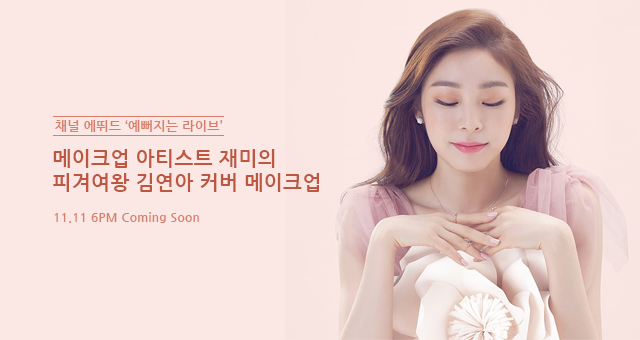
<style>
.page{position:relative;width:640px;height:340px;background:#fbe8e4}
.page>*{position:absolute;margin:0}
.t1{font:13px "NanumGothicBold";letter-spacing:0.025em;color:#d77f6c}
.t2{font:20px "NanumGothicBold";letter-spacing:0.025em;color:#bc5842}
.t3{font:12px "NanumGothicBold";letter-spacing:0.025em;color:#d77f6c}
</style>
<div class="page">
<p class="t1" style="left:55px;top:120px;width:168px;height:12px">채널 에뛰드 ‘예뻐지는 라이브’</p>
<p class="t2" style="left:53px;top:149px;width:266px;height:43px">메이크업 아티스트 재미의<br>피겨여왕 김연아 커버 메이크업</p>
<p class="t3" style="left:54px;top:212px;width:145px;height:11px">11.11 6PM Coming Soon</p>
</div>
